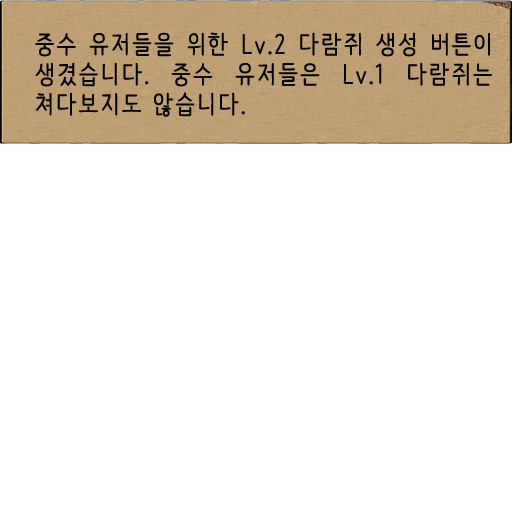
<style>
.page{position:relative;width:512px;height:512px;background:#ffffff}
.page>*{position:absolute;margin:0}
.t1{font:25px "NanumBarunpen";letter-spacing:0.075em;color:#000000;font-weight:bold}
</style>
<div class="page">
<p class="t1" style="left:35px;top:32px;width:457px;height:85px;text-align:justify">중수 유저들을 위한 Lv.2 다람쥐 생성 버튼이 생겼습니다. 중수 유저들은 Lv.1 다람쥐는 쳐다보지도 않습니다.</p>
</div>
